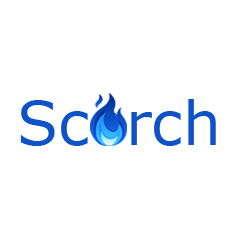
<style>
.page{position:relative;width:240px;height:240px;background:#ffffff}
.page>*{position:absolute;margin:0}
.t1{font:60px "Verdana";color:#0d52c7}
</style>
<div class="page">
<p class="t1" style="left:20px;top:99px;width:196px;height:47px">Scorch</p>
</div>
